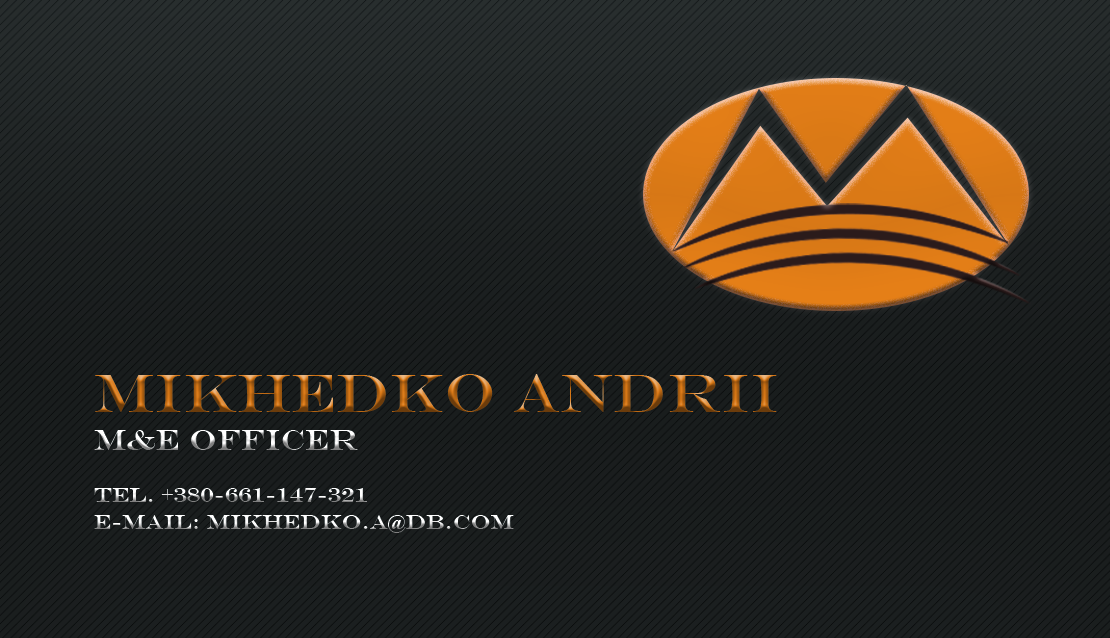
<style>
.page{position:relative;width:1110px;height:638px}
.page>*{position:absolute;margin:0}
.t1{font:54.2px "EngraversMT"}
.t2{font:29.2px "EngraversMT"}
.t3{font:20.8px "EngraversMT"}
</style>
<div class="page">
<p class="t1" style="left:95px;top:374px;width:682px;height:38px">Mikhedko Andrii</p>
<p class="t2" style="left:94px;top:430px;width:264px;height:20px">M&amp;E officer</p>
<p class="t3" style="left:94px;top:488px;width:273px;height:14px">tel. +380-661-147-321</p>
<p class="t3" style="left:94px;top:515px;width:420px;height:18px">e-mail: mikhedko.a@db.com</p>
</div>
